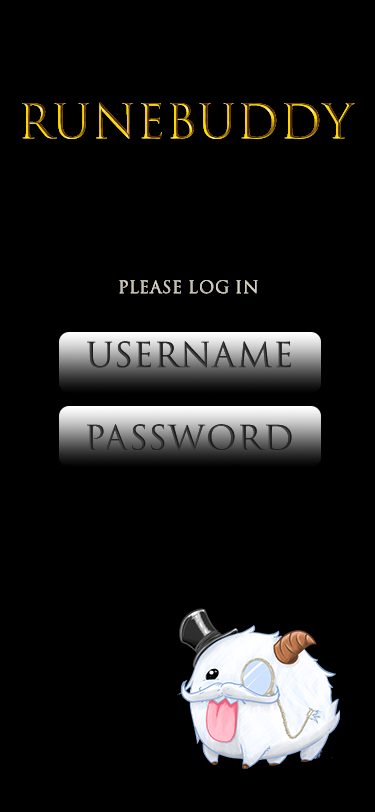
<style>
.page{position:relative;width:375px;height:812px;background:#000000}
.page>*{position:absolute;margin:0}
.t1{font:45.8px "TrajanColor-Concept";font-weight:bold}
.t2{font:16.7px "TrajanColor-Concept";color:#c5c1b1;font-weight:bold}
.t3{font:33.3px "TrajanColor-Concept";color:#303030;font-weight:bold}
.t4{font:33.3px "TrajanColor-Concept";color:#2f2f2f;font-weight:bold}
</style>
<div class="page">
<p class="t1" style="left:22px;top:102px;width:333px;height:37px">Runebuddy</p>
<p class="t2" style="left:119px;top:280px;width:139px;height:14px">PLEASE LOG IN</p>
<p class="t3" style="left:87px;top:341px;width:204px;height:27px">USERNAME</p>
<p class="t4" style="left:87px;top:424px;width:205px;height:27px">PASSWORD</p>
</div>
